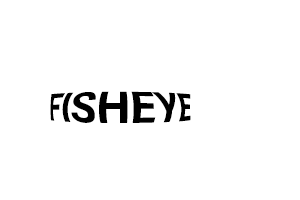
<style>
.page{position:relative;width:300px;height:200px;background:#ffffff}
.page>*{position:absolute;margin:0}
.t1{font:36px "Roboto-Bold";color:#000000}
</style>
<div class="page">
<p class="t1" style="left:50px;top:91px;width:141px;height:32px">FISHEYE</p>
</div>
